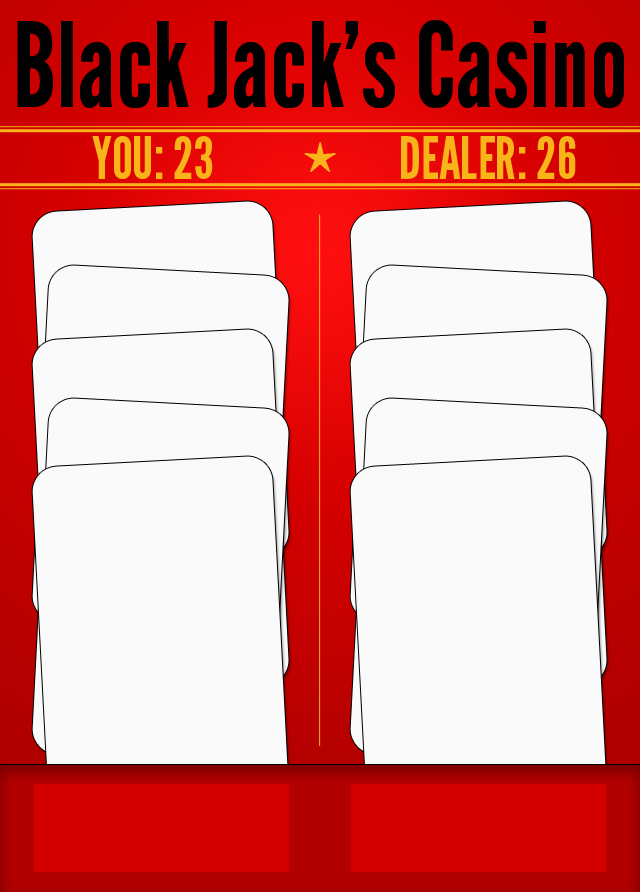
<style>
.page{position:relative;width:640px;height:892px;background:#fafafa}
.page>*{position:absolute;margin:0}
.t1{font:116.7px "LeagueGothic";color:#000000}
.t2{font:58.3px "LeagueGothic";color:#f8b419}
.t3{font:41.7px "ArialUnicodeMS";color:#f8b419}
</style>
<div class="page">
<p class="t1" style="left:17px;top:20px;width:607px;height:89px">Black Jack’s Casino</p>
<p class="t2" style="left:92px;top:136px;width:121px;height:43px">YOU: 23</p>
<p class="t2" style="left:401px;top:136px;width:175px;height:43px">DEALER: 26</p>
<p class="t3" style="left:304px;top:142px;width:32px;height:30px">★</p>
</div>
